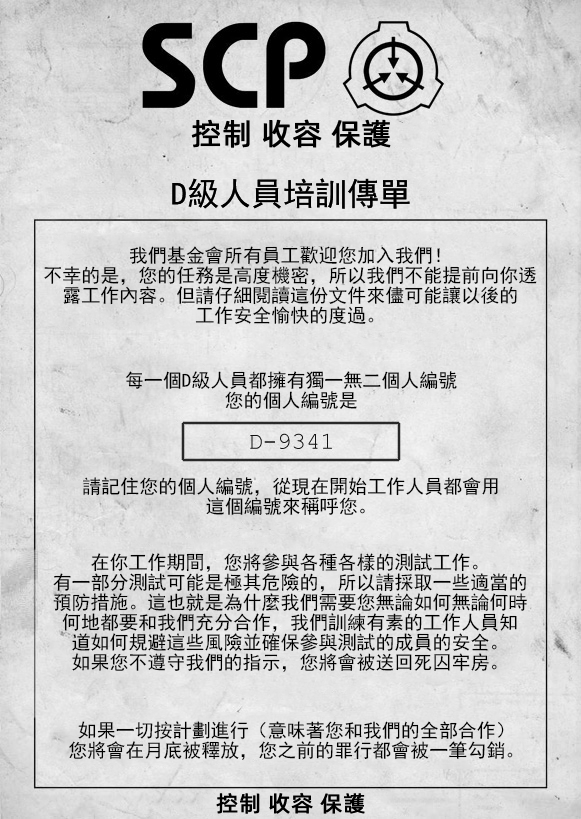
<style>
.page{position:relative;width:581px;height:819px}
.page>*{position:absolute;margin:0}
.t1{font:30px "AlibabaPuHuiTiR";color:#000000;font-weight:bold}
.t2{font:32px "SimHei";color:#000000}
.t3{font:19px/20px "SimHei";color:#000000}
.t4{font:22px "AlibabaPuHuiTiR";color:#000000;font-weight:bold}
</style>
<div class="page">
<p class="t1" style="left:191px;top:119px;width:200px;height:29px">控制 收容 保護</p>
<p class="t2" style="left:172px;top:178px;width:238px;height:31px">D級人員培訓傳單</p>
<p class="t3" style="left:44px;top:246px;width:493px;height:79px;text-align:center">我們基金會所有員工歡迎您加入我們！<br>不幸的是，您的任務是高度機密，所以我們不能提前向你透<br>露工作內容。但請仔細閱讀這份文件來儘可能讓以後的<br>工作安全愉快的度過。</p>
<p class="t3" style="left:126px;top:371px;width:331px;height:39px;text-align:center">每一個D級人員都擁有獨一無二個人編號<br>您的個人編號是</p>
<p class="t3" style="left:83px;top:477px;width:415px;height:38px;text-align:center">請記住您的個人編號，從現在開始工作人員都會用<br>這個編號來稱呼您。</p>
<p class="t3" style="left:53px;top:553px;width:474px;height:119px;text-align:center">在你工作期間，您將參與各種各樣的測試工作。<br>有一部分測試可能是極其危險的，所以請採取一些適當的<br>預防措施。這也就是為什麼我們需要您無論如何無論何時<br>何地都要和我們充分合作，我們訓練有素的工作人員知<br>道如何規避這些風險並確保參與測試的成員的安全。<br>如果您不遵守我們的指示，您將會被送回死囚牢房。</p>
<p class="t3" style="left:69px;top:721px;width:444px;height:39px;text-align:center">如果一切按計劃進行（意味著您和我們的全部合作）<br>您將會在月底被釋放，您之前的罪行都會被一筆勾銷。</p>
<p class="t4" style="left:216px;top:793px;width:149px;height:21px">控制 收容 保護</p>
</div>
